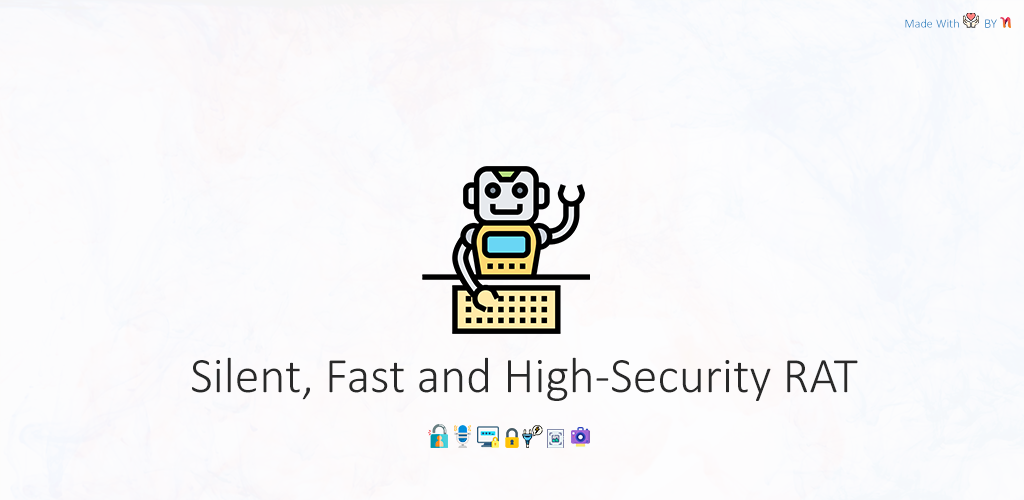
<style>
.page{position:relative;width:1024px;height:500px}
.page>*{position:absolute;margin:0}
.t1{font:12.3px "Calibri-Light"}
.t2{font:13.2px "Calibri-Light"}
.t3{font:50px "Calibri-Light";color:#292929}
</style>
<div class="page">
<p class="t1" style="left:905px;top:19px;width:54px;height:9px">Made With</p>
<p class="t2" style="left:985px;top:19px;width:12px;height:9px">BY</p>
<p class="t3" style="left:192px;top:357px;width:666px;height:44px">Silent, Fast and High-Security RAT</p>
</div>
